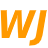
<style>
.page{position:relative;width:48px;height:48px;background:#ffffff}
.page>*{position:absolute;margin:0}
.t1{font:38px "DejaVuSansCondensed-BoldOblique";color:#ff9900}
</style>
<div class="page">
<p class="t1" style="left:0px;top:10px;width:47px;height:36px">WJ</p>
</div>
